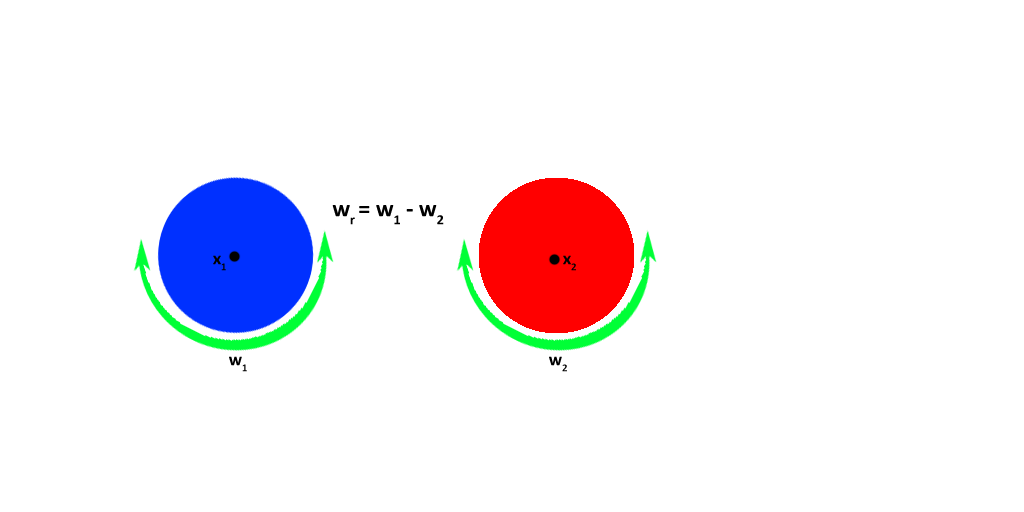
<style>
.page{position:relative;width:1024px;height:512px;background:#ffffff}
.page>*{position:absolute;margin:0}
.t1{font:24px "Calibri-Bold";color:#000000}
.t2{font:18px "Calibri-Bold";color:#000000}
</style>
<div class="page">
<p class="t1" style="left:332px;top:205px;width:112px;height:20px">wr = w1 - w2</p>
<p class="t2" style="left:213px;top:255px;width:13px;height:16px">x1</p>
<p class="t2" style="left:563px;top:255px;width:13px;height:16px">x2</p>
<p class="t2" style="left:229px;top:356px;width:18px;height:16px">w1</p>
<p class="t2" style="left:549px;top:356px;width:18px;height:16px">w2</p>
</div>
